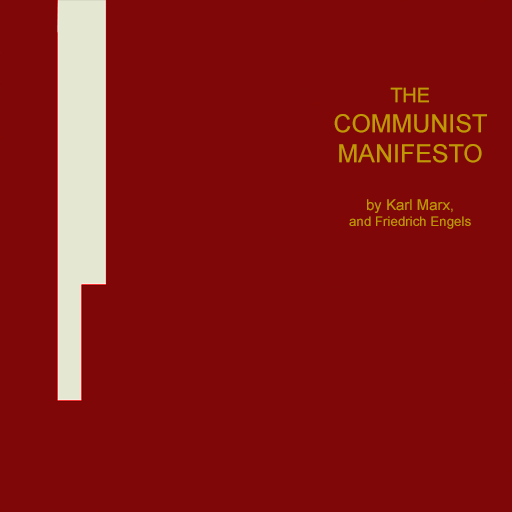
<style>
.page{position:relative;width:512px;height:512px;background:#7f0707}
.page>*{position:absolute;margin:0}
.t1{font:13.3px "ArialMT";color:#c19705}
.t2{font:19.9px "ArialMT";color:#c19705}
.t3{font:24.9px "ArialMT";color:#c19705}
.t4{font:15px "ArialMT";color:#c19705}
</style>
<div class="page">
<p class="t1" style="left:334px;top:87px;width:153px;height:142px;text-align:center"><span class="t2">THE<br></span><span class="t3">COMMUNIST<br>MANIFESTO<br><br></span><span class="t4">by Karl Marx,<br></span>and Friedrich Engels</p>
</div>
